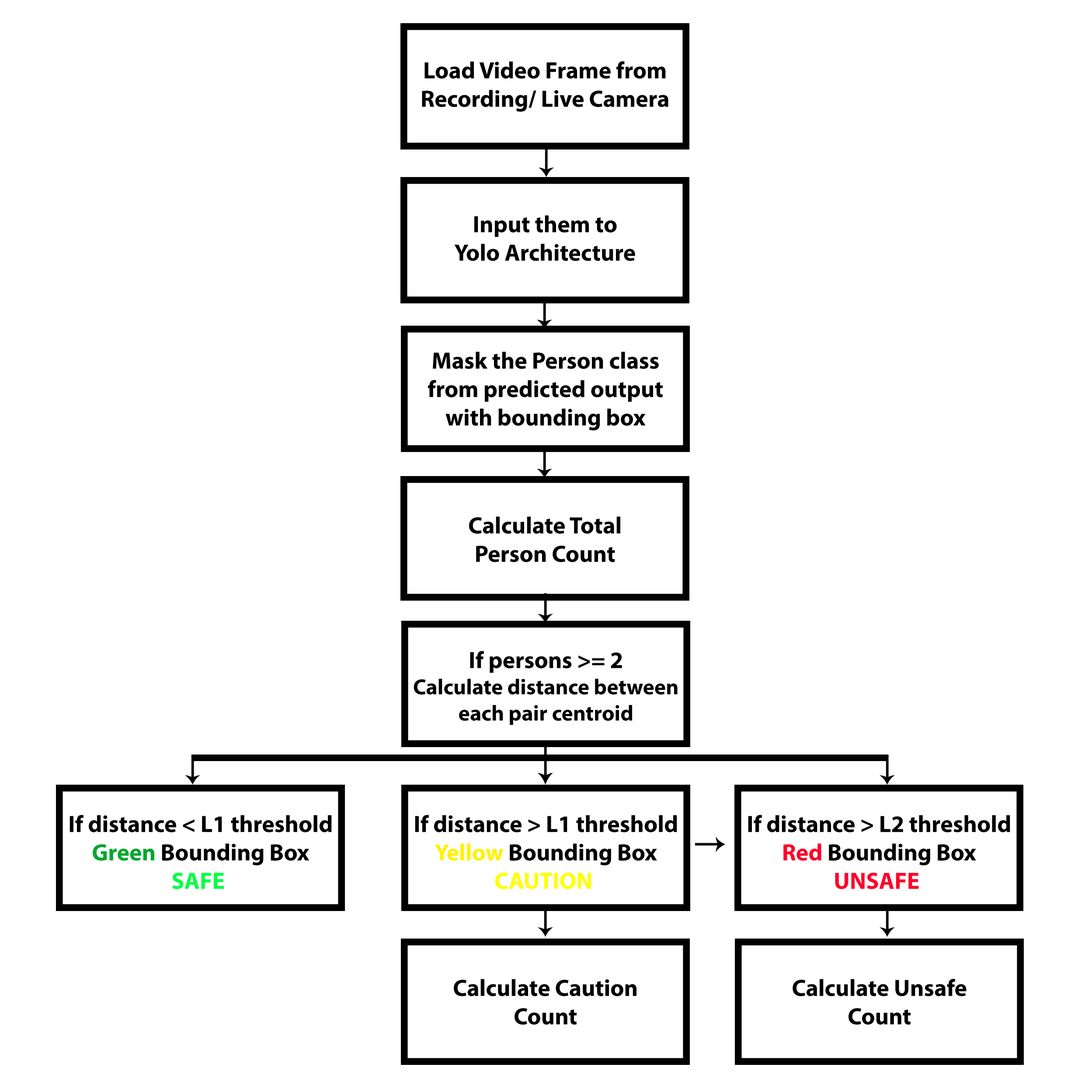
<style>
.page{position:relative;width:1092px;height:1092px;background:#ffffff}
.page>*{position:absolute;margin:0}
.t1{font:23.7px "MyriadPro-Bold";color:#000000}
.t2{font:21.9px "MyriadPro-Bold";color:#000000}
.t3{font:23.7px "MyriadPro-Bold";color:#00a72d}
.t4{font:23.7px "MyriadPro-Bold";color:#00ff44}
.t5{font:23.7px "MyriadPro-Bold";color:#fff200}
.t6{font:23.7px "MyriadPro-Bold";color:#ffff00}
.t7{font:23.7px "MyriadPro-Bold";color:#ff002a}
</style>
<div class="page">
<p class="t1" style="left:422px;top:61px;width:246px;height:51px;text-align:center">Load Video Frame from<br>Recording/ Live Camera</p>
<p class="t1" style="left:454px;top:215px;width:181px;height:46px;text-align:center">Input them to<br>Yolo Architecture</p>
<p class="t1" style="left:428px;top:351px;width:235px;height:80px;text-align:center">Mask the Person class<br>from predicted output<br>with bounding box</p>
<p class="t1" style="left:469px;top:516px;width:151px;height:46px;text-align:center">Calculate Total<br>Person Count</p>
<p class="t2" style="left:414px;top:651px;width:264px;height:74px;text-align:center"><span class="t1">If persons &gt;= 2<br></span>Calculate distance between<br>each pair centroid</p>
<p class="t1" style="left:70px;top:815px;width:262px;height:74px;text-align:center">If distance &lt; L1 threshold<br><span class="t3">Green </span>Bounding Box<br><span class="t4">SAFE</span></p>
<p class="t1" style="left:415px;top:815px;width:262px;height:74px;text-align:center">If distance &gt; L1 threshold<br><span class="t5">Yellow </span>Bounding Box<br><span class="t6">CAUTION</span></p>
<p class="t1" style="left:748px;top:815px;width:262px;height:74px;text-align:center">If distance &gt; L2 threshold<br><span class="t7">Red </span>Bounding Box<br><span class="t7">UNSAFE</span></p>
<p class="t1" style="left:454px;top:979px;width:182px;height:46px;text-align:center">Calculate Caution<br>Count</p>
<p class="t1" style="left:793px;top:979px;width:174px;height:46px;text-align:center">Calculate Unsafe<br>Count</p>
</div>
